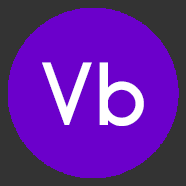
<style>
.page{position:relative;width:186px;height:186px;background:#6b00cb}
.page>*{position:absolute;margin:0}
.t1{font:80px "CaviarDreams-Bold";color:#ffffff}
</style>
<div class="page">
<p class="t1" style="left:42px;top:62px;width:102px;height:64px">Vb</p>
</div>
